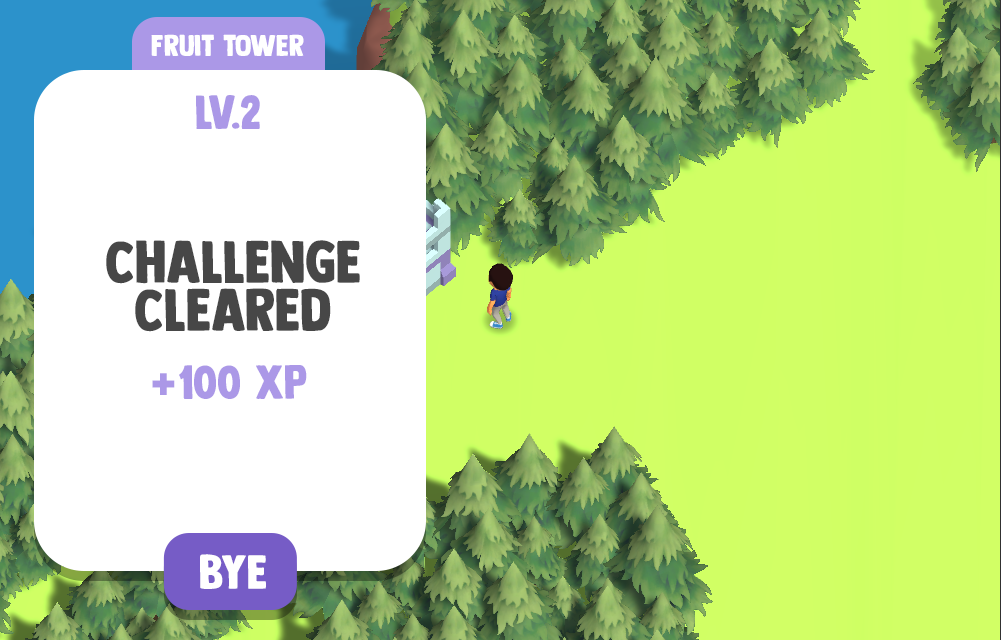
<style>
.page{position:relative;width:1001px;height:640px;background:#ffffff}
.page>*{position:absolute;margin:0}
.t1{font:30px "DKLongreach-Regular";color:#ffffff}
.t2{font:48px "DKLongreach-Regular";color:#ab98e7}
.t3{font:60px/48px "DKLongreach-Regular";color:#474747}
.t4{font:48px "ChangaOne";color:#ab98e7}
.t5{font:48px "DKLongreach-Regular";color:#ffffff}
</style>
<div class="page">
<p class="t1" style="left:151px;top:34px;width:153px;height:22px">fruit tower</p>
<p class="t2" style="left:196px;top:95px;width:64px;height:34px">lv.2</p>
<p class="t3" style="left:106px;top:240px;width:254px;height:92px;text-align:center">challenge<br>cleared</p>
<p class="t2" style="left:152px;top:365px;width:155px;height:34px"><span class="t4">+</span>100 XP</p>
<p class="t5" style="left:200px;top:554px;width:66px;height:35px">bye</p>
</div>
